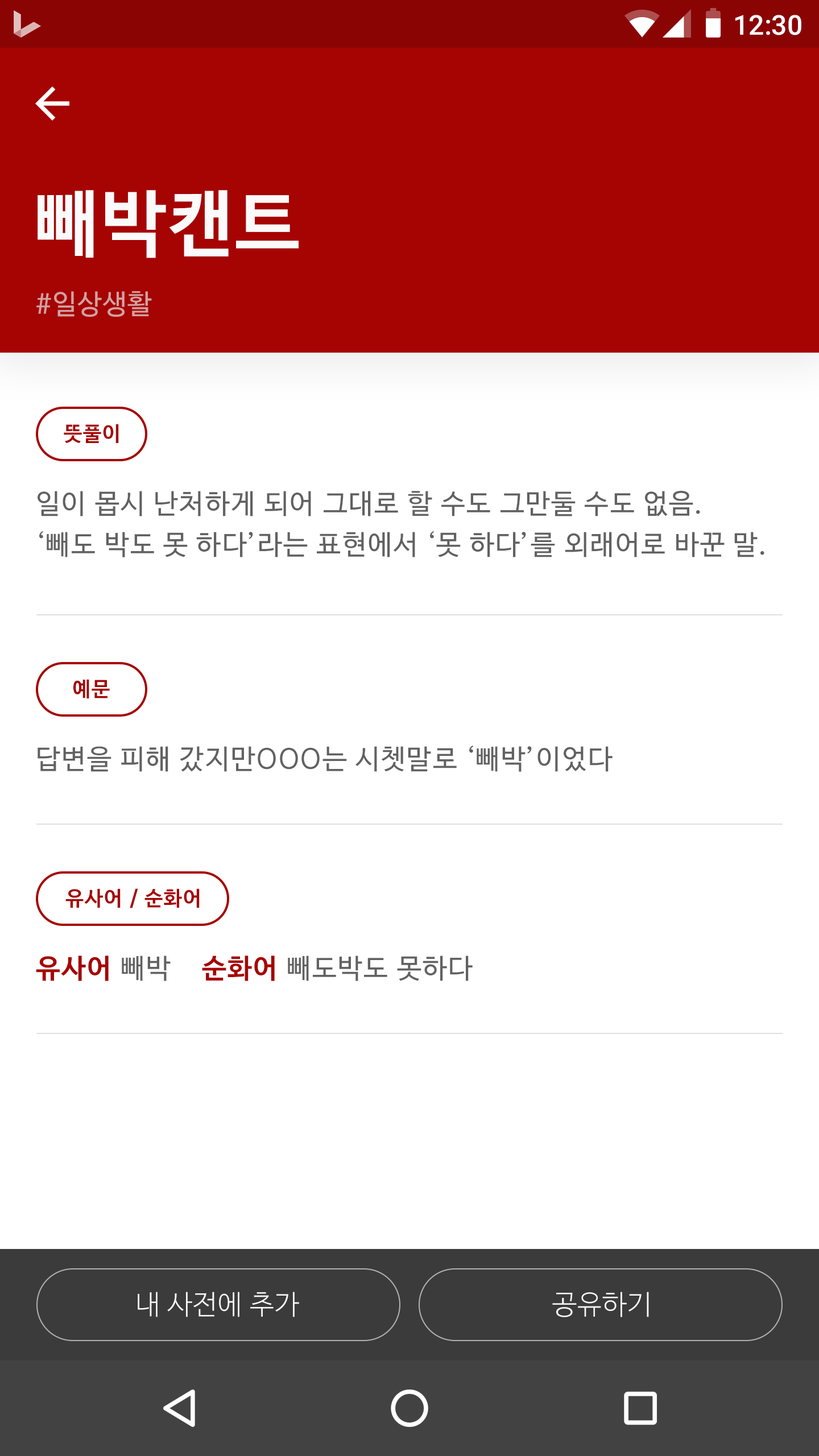
<style>
.page{position:relative;width:819px;height:1456px;background:#ffffff}
.page>*{position:absolute;margin:0}
.t1{font:27.3px "Roboto-Medium";color:#ffffff}
.t2{font:72.8px "NanumBarunGothicBold";letter-spacing:0.025em;color:#fafafa}
.t3{font:27.3px "NanumBarunGothic";letter-spacing:0.025em;color:#d3a1a1}
.t4{font:20.5px "NanumBarunGothicBold";letter-spacing:0.05em;color:#a60303}
.t5{font:27.3px/40.9px "NanumBarunGothic";letter-spacing:0.05em;color:#616161}
.t6{font:27.3px "NanumBarunGothic";letter-spacing:0.05em;color:#616161}
.t7{font:27.3px "NanumBarunGothicBold";letter-spacing:0.05em;color:#a60303}
.t8{font:27.3px "NanumBarunGothicLight";letter-spacing:0.025em;color:#fafafa}
</style>
<div class="page">
<p class="t1" style="left:735px;top:15px;width:66px;height:20px">12:30</p>
<p class="t2" style="left:38px;top:190px;width:261px;height:68px">빼박캔트</p>
<p class="t3" style="left:36px;top:291px;width:116px;height:26px">#일상생활</p>
<p class="t4" style="left:64px;top:424px;width:55px;height:19px">뜻풀이</p>
<p class="t5" style="left:38px;top:491px;width:726px;height:66px">일이 몹시 난처하게 되어 그대로 할 수도 그만둘 수도 없음. <br>‘빼도 박도 못 하다’라는 표현에서 ‘못 하다’를 외래어로 바꾼 말.</p>
<p class="t4" style="left:73px;top:679px;width:37px;height:19px">예문</p>
<p class="t6" style="left:38px;top:745px;width:575px;height:27px">답변을 피해 갔지만OOO는 시쳇말로 ‘빼박’이었다</p>
<p class="t4" style="left:65px;top:888px;width:135px;height:20px">유사어 / 순화어</p>
<p class="t6" style="left:36px;top:955px;width:437px;height:26px"><span class="t7">유사어</span> 빼박    <span class="t7">순화어</span> 빼도박도 못하다</p>
<p class="t8" style="left:138px;top:1292px;width:161px;height:25px">내 사전에 추가</p>
<p class="t8" style="left:552px;top:1292px;width:97px;height:25px">공유하기</p>
</div>
